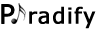
<style>
.page{position:relative;width:100px;height:30px;background:#ffffff}
.page>*{position:absolute;margin:0}
.t1{font:22px "Verdana";letter-spacing:0.03em;color:#000000;font-weight:bold}
.t2{font:26.5px "Verdana";letter-spacing:0.03em;color:#000000;font-weight:bold}
</style>
<div class="page">
<p class="t1" style="left:1px;top:4px;width:95px;height:25px"><span class="t2">P </span>radify</p>
</div>
